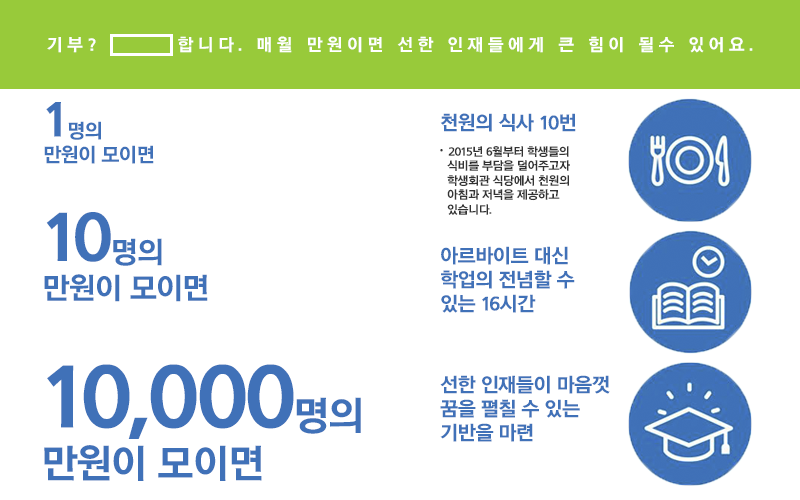
<style>
.page{position:relative;width:800px;height:500px;background:#ffffff}
.page>*{position:absolute;margin:0}
.t1{font:17.5px "THELuxGoEB";letter-spacing:0.24em;color:#ffffff}
.t2{font:20px "THELuxGoEB";letter-spacing:-0.04em;color:#4071b8}
.t3{font:50px "THELuxGoEB";letter-spacing:-0.04em;color:#4071b8}
.t4{font:12px "THELuxGoEB";letter-spacing:-0.04em;color:#333333}
.t5{font:15px "THELuxGoEB";letter-spacing:-0.04em;color:#333333}
.t6{font:30px "THELuxGoEB";letter-spacing:-0.04em;color:#4071b8}
.t7{font:70px "THELuxGoEB";letter-spacing:-0.04em;color:#4071b8}
.t8{font:40px "THELuxGoEB";letter-spacing:-0.04em;color:#4071b8}
.t9{font:90px "THELuxGoEB";letter-spacing:-0.04em;color:#4071b8}
</style>
<div class="page">
<p class="t1" style="left:47px;top:36px;width:706px;height:17px">기부?        합니다. 매월 만원이면 선한 인재들에게 큰 힘이 될수 있어요.</p>
<p class="t2" style="left:44px;top:102px;width:110px;height:62px"><span class="t3">1</span>명의<br>만원이 모이면</p>
<p class="t2" style="left:440px;top:113px;width:136px;height:19px">천원의 식사 10번</p>
<p class="t4" style="left:440px;top:146px;width:130px;height:69px"><span class="t5">ㆍ</span>2015년 6월부터 학생들의<br>    식비를 부담을 덜어주고자 <br>    학생회관 식당에서 천원의 <br>    아침과 저녁을 제공하고 <br>    있습니다.</p>
<p class="t6" style="left:44px;top:212px;width:164px;height:90px"><span class="t7">10</span>명의<br>만원이 모이면</p>
<p class="t2" style="left:441px;top:246px;width:134px;height:67px">아르바이트 대신<br>학업의 전념할 수<br>있는 16시간</p>
<p class="t8" style="left:44px;top:364px;width:317px;height:117px"><span class="t9">10,000</span>명의<br>만원이 모이면</p>
<p class="t2" style="left:440px;top:375px;width:170px;height:67px">선한 인재들이 마음껏<br>꿈을 펼칠 수 있는<br>기반을 마련</p>
</div>
